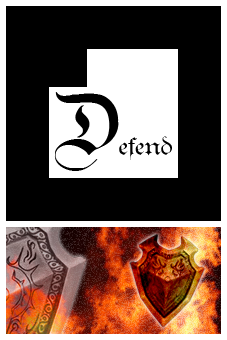
<style>
.page{position:relative;width:227px;height:340px;background:#000000}
.page>*{position:absolute;margin:0}
.t1{font:24px "TeutonicNo1-DemiBold";color:#000000}
.t2{font:80px "TeutonicNo1-DemiBold";color:#000000}
</style>
<div class="page">
<p class="t1" style="left:54px;top:92px;width:118px;height:79px"><span class="t2">D</span>efend</p>
</div>
